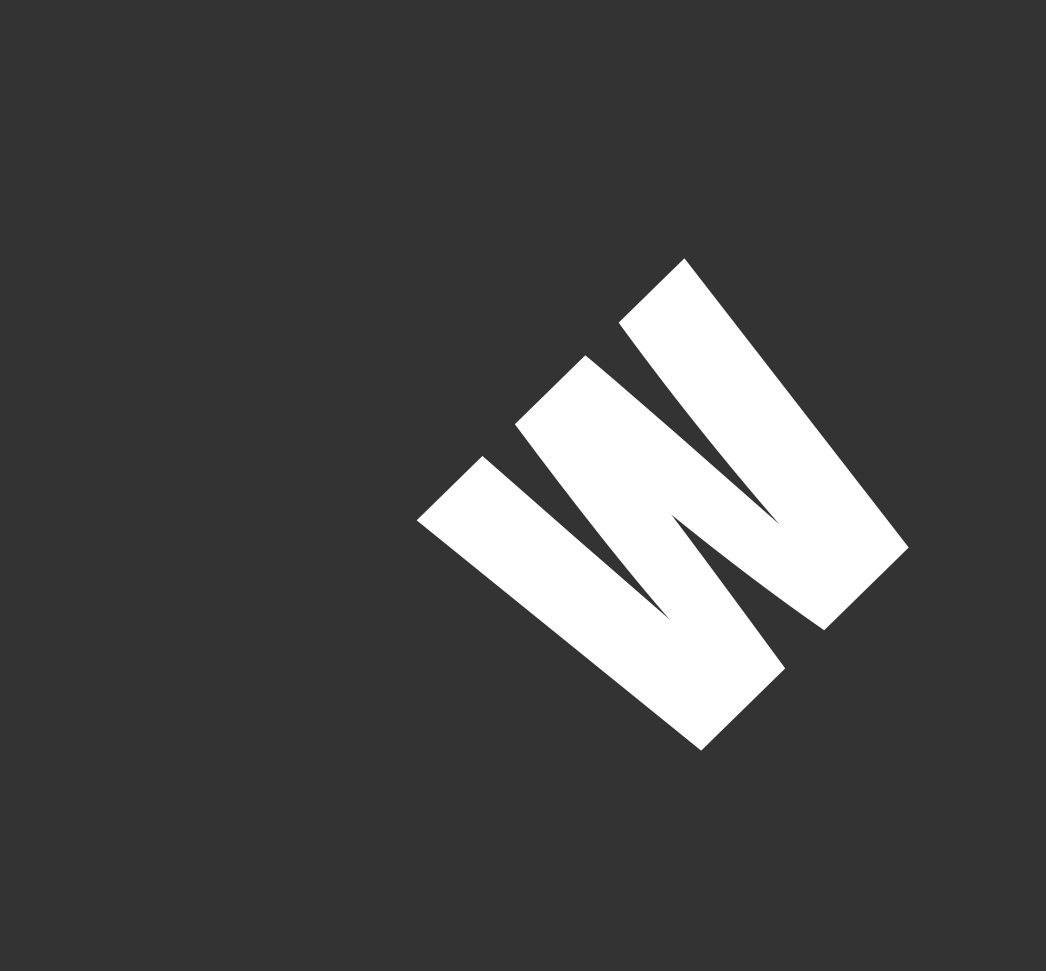
<style>
.page{position:relative;width:1046px;height:971px;background:#333333}
.page>*{position:absolute;margin:0}
.t1{font:459.8px "Impact";color:#ffffff}
</style>
<div class="page">
<p class="t1" style="left:416px;top:258px;width:493px;height:493px">W</p>
</div>
